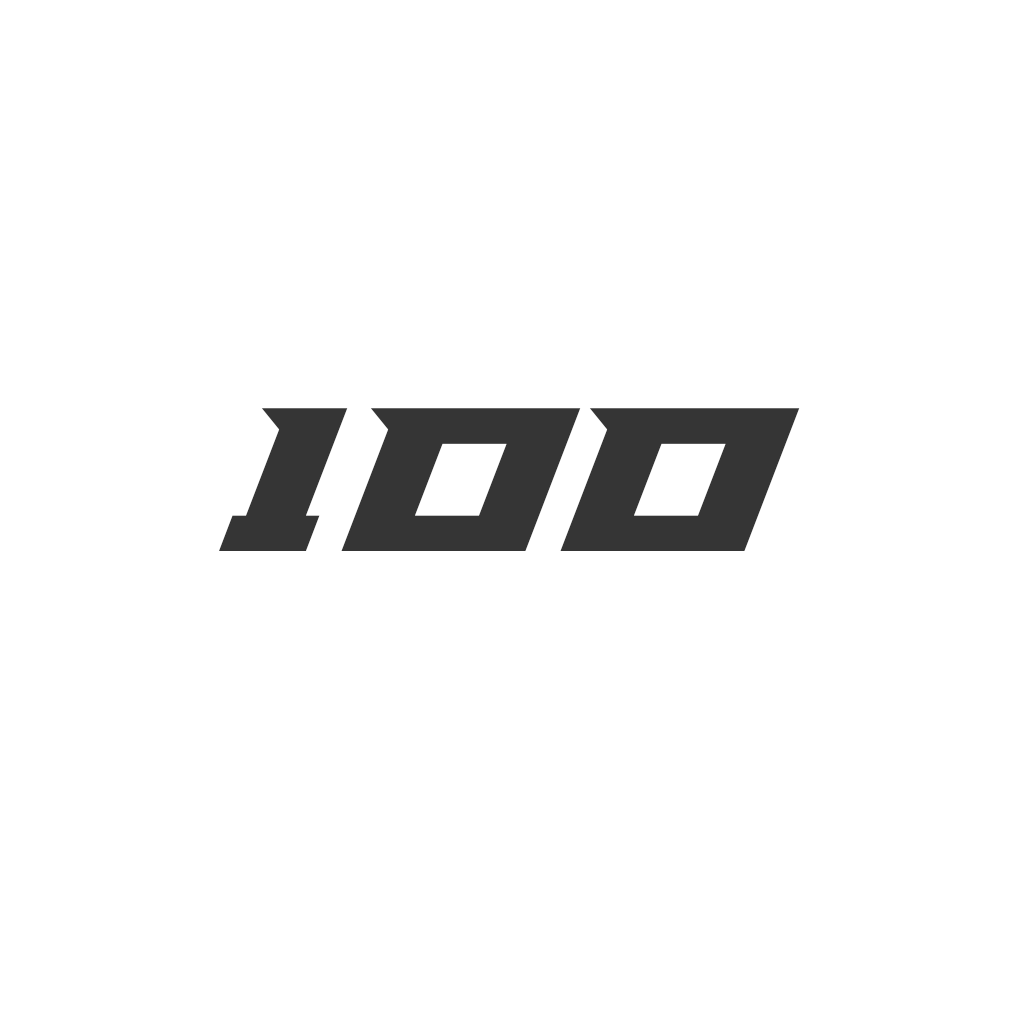
<style>
.page{position:relative;width:1024px;height:1024px;background:#ffffff}
.page>*{position:absolute;margin:0}
.t1{font:221px "Paladins";color:#353535}
</style>
<div class="page">
<p class="t1" style="left:219px;top:408px;width:581px;height:143px">100</p>
</div>
